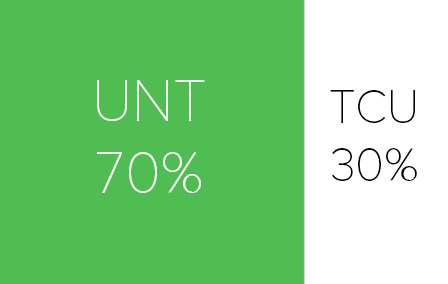
<style>
.page{position:relative;width:448px;height:284px;background:#4fbd51}
.page>*{position:absolute;margin:0}
.t1{font:60px "ProximaNovaT-Thin";color:#ffffff}
.t2{font:48px "ProximaNovaT-Thin";color:#000000}
</style>
<div class="page">
<p class="t1" style="left:97px;top:80px;width:108px;height:113px;text-align:center">UNT<br>70%</p>
<p class="t2" style="left:330px;top:90px;width:87px;height:91px;text-align:center">TCU<br>30%</p>
</div>
